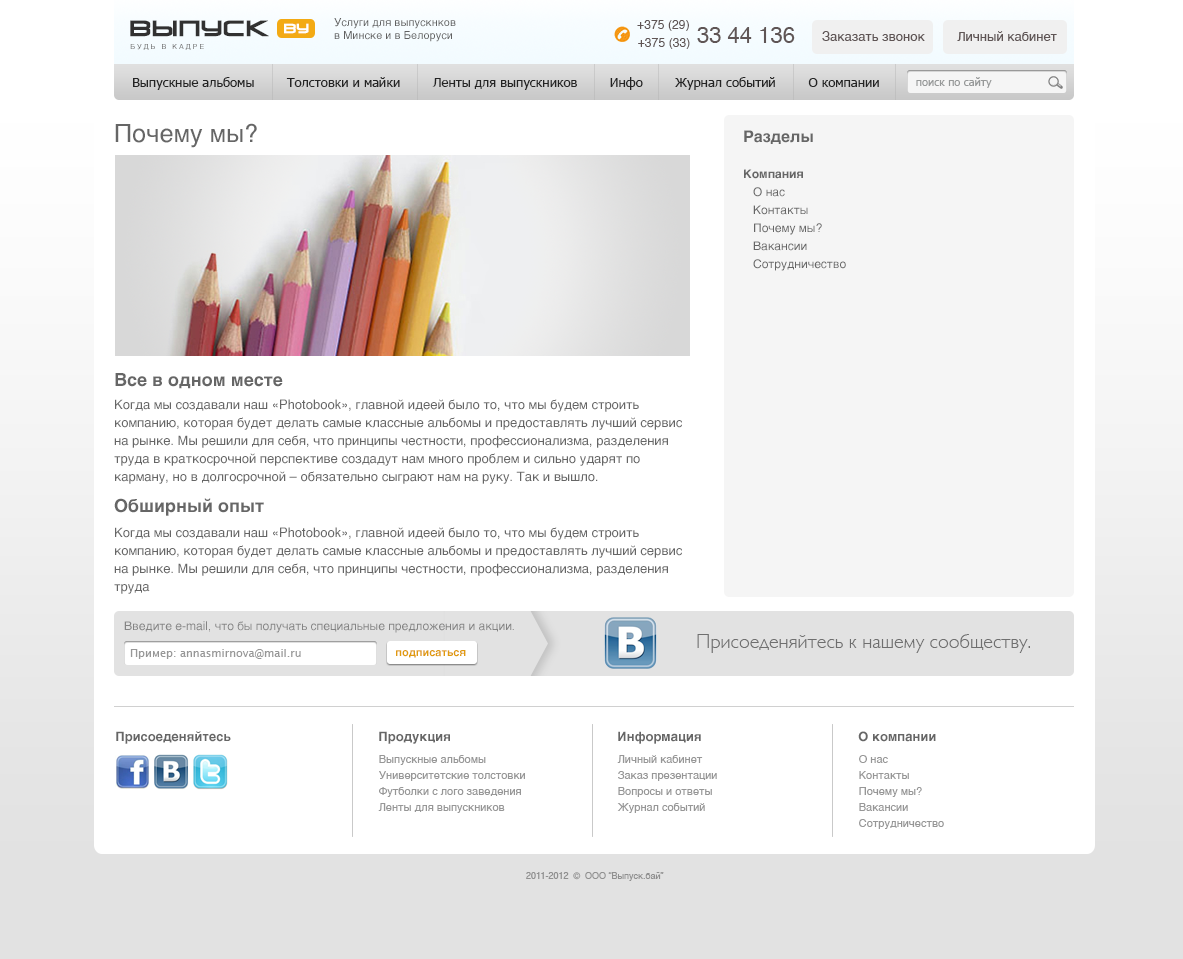
<style>
.page{position:relative;width:1183px;height:959px;background:#ffffff}
.page>*{position:absolute;margin:0}
.t1{font:21px "VenusRisingCyrillic";letter-spacing:0.01em;color:#313131;font-weight:bold}
.t2{font:12.6px "VenusRisingCyrillic";letter-spacing:0.01em;color:#ffffff;font-weight:bold}
.t3{font:11px "Helvetica";color:#616161}
.t4{font:12px "Helvetica";letter-spacing:0.01em;color:#5f5555}
.t5{font:22px "Helvetica";color:#5f5555}
.t6{font:13px "Helvetica";color:#5f5555}
.t7{font:7px "Helvetica";letter-spacing:0.3em;color:#6d6d6d;text-transform:uppercase}
.t8{font:13px "Tahoma";color:#242424}
.t9{font:11px "Tahoma";color:#979999}
.t10{font:25px "Helvetica";color:#666666}
.t11{font:12px/18px "Helvetica";color:#666666}
.t12{font:16px "Helvetica-Bold";color:#666666}
.t13{font:12px/36px "Helvetica-Bold";color:#666666}
.t14{font:18px "Helvetica-Bold";color:#666666}
.t15{font:13px/18px "Helvetica";color:#666666}
.t16{font:12px "Helvetica";color:#848484}
.t17{font:20px "GillSans-Light";color:#6f6f6f}
.t18{font:11px "LucidaGrande";color:#979797}
.t19{font:11px "Helvetica-Bold";color:#e09b0e}
.t20{font:13px "Helvetica-Bold";color:#666666}
.t21{font:11px/16px "Helvetica";color:#979797}
.t22{font:9px "Helvetica";color:#909090}
</style>
<div class="page">
<p class="t1" style="left:130px;top:20px;width:139px;height:17px">ВЫпуск</p>
<p class="t2" style="left:284px;top:23px;width:25px;height:11px">by</p>
<p class="t3" style="left:334px;top:18px;width:122px;height:24px">Услуги для выпускнков<br>в Минске и в Белоруси</p>
<p class="t4" style="left:637px;top:20px;width:52px;height:11px">+375 (29)</p>
<p class="t5" style="left:697px;top:27px;width:98px;height:16px">33 44 136</p>
<p class="t4" style="left:638px;top:38px;width:52px;height:11px">+375 (33)</p>
<p class="t6" style="left:822px;top:31px;width:235px;height:10px">Заказать звонок         Личный кабинет</p>
<p class="t7" style="left:130px;top:44px;width:74px;height:6px">будь в кадре</p>
<p class="t8" style="left:133px;top:77px;width:746px;height:13px">Выпускные альбомы        Толстовки и майки        Ленты для выпускников        Инфо        Журнал событий        О компании</p>
<p class="t9" style="left:916px;top:77px;width:76px;height:11px">поиск по сайту</p>
<p class="t10" style="left:115px;top:123px;width:142px;height:25px">Почему мы?</p>
<p class="t11" style="left:744px;top:130px;width:102px;height:141px"><span class="t12">Разделы<br></span><span class="t13">Компания<br></span>   О нас<br>   Контакты<br>   Почему мы? <br>   Вакансии<br>   Сотрудничество</p>
<p class="t14" style="left:115px;top:373px;width:168px;height:16px">Все в одном месте</p>
<p class="t15" style="left:114px;top:399px;width:568px;height:85px">Когда мы создавали наш «Photobook», главной идеей было то, что мы будем строить компанию, которая будет делать самые классные альбомы и предоставлять лучший сервис на рынке. Мы решили для себя, что принципы честности, профессионализма, разделения труда в краткосрочной перспективе создадут нам много проблем и сильно ударят по карману, но в долгосрочной – обязательно сыграют нам на руку. Так и вышло.</p>
<p class="t14" style="left:114px;top:498px;width:150px;height:18px">Обширный опыт</p>
<p class="t15" style="left:114px;top:527px;width:568px;height:67px">Когда мы создавали наш «Photobook», главной идеей было то, что мы будем строить компанию, которая будет делать самые классные альбомы и предоставлять лучший сервис на рынке. Мы решили для себя, что принципы честности, профессионализма, разделения труда</p>
<p class="t16" style="left:124px;top:621px;width:390px;height:12px">Введите e-mail, что бы получать специальные предложения и акции.</p>
<p class="t17" style="left:697px;top:634px;width:333px;height:19px">Присоеденяйтесь к нашему сообществу.</p>
<p class="t18" style="left:130px;top:649px;width:171px;height:10px">Пример: annasmirnova@mail.ru</p>
<p class="t19" style="left:396px;top:650px;width:70px;height:8px">подписаться</p>
<p class="t20" style="left:116px;top:731px;width:115px;height:13px">Присоеденяйтесь</p>
<p class="t20" style="left:379px;top:731px;width:71px;height:13px">Продукция</p>
<p class="t20" style="left:618px;top:731px;width:83px;height:13px">Информация</p>
<p class="t20" style="left:858px;top:731px;width:78px;height:11px">О компании</p>
<p class="t21" style="left:378px;top:755px;width:147px;height:58px">Выпускные альбомы<br>Университетские толстовки<br>Футболки с лого заведения<br>Ленты для выпускников</p>
<p class="t21" style="left:617px;top:755px;width:100px;height:58px">Личный кабинет<br>Заказ презентации<br>Вопросы и ответы<br>Журнал событий</p>
<p class="t21" style="left:859px;top:755px;width:85px;height:74px">О нас<br>Контакты<br>Почему мы? <br>Вакансии<br>Сотрудничество</p>
<p class="t22" style="left:526px;top:872px;width:138px;height:9px">2011-2012  ©  ООО “Выпуск.бай”</p>
</div>
